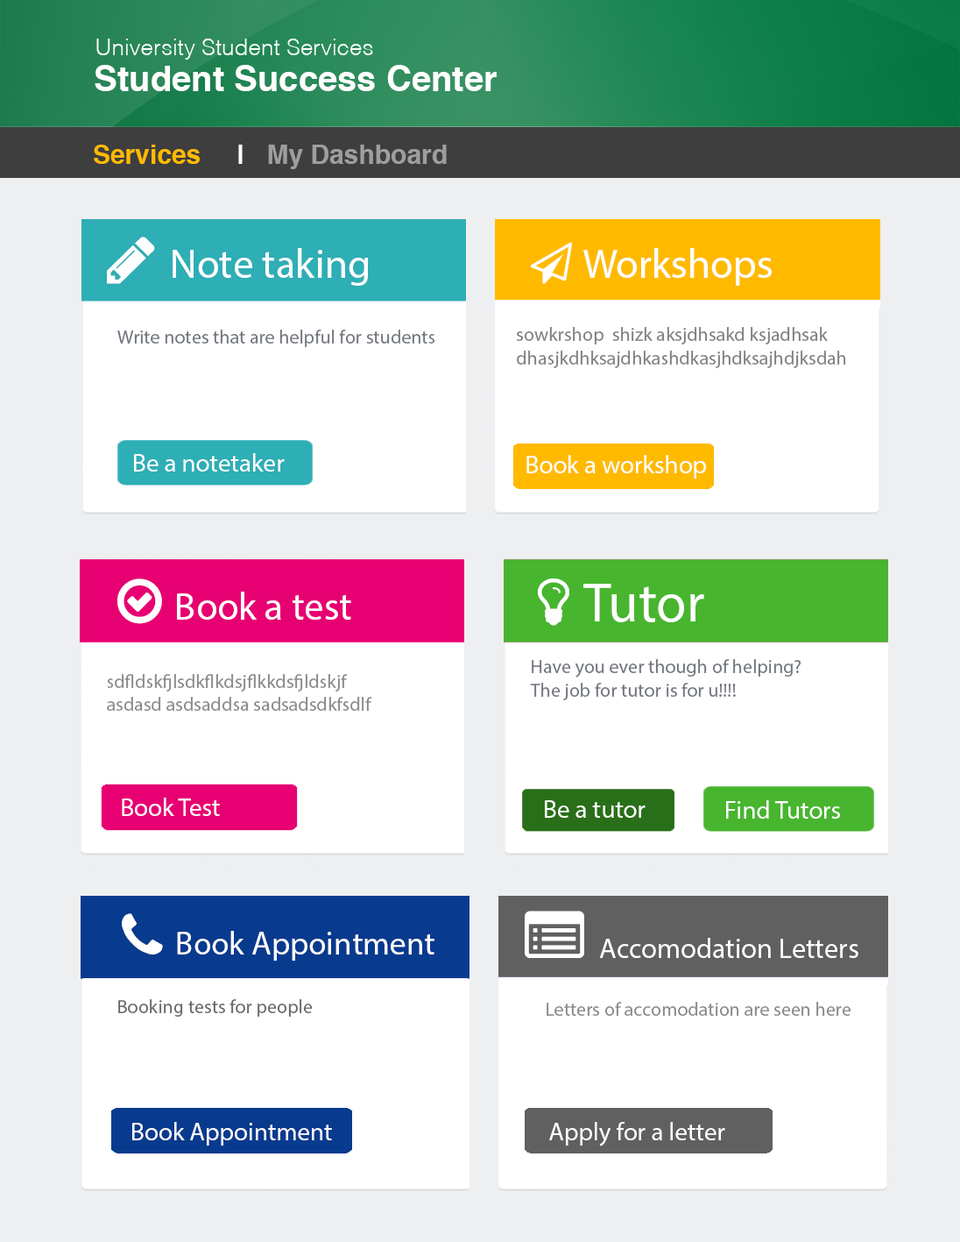
<style>
.page{position:relative;width:960px;height:1242px;background:#ffffff}
.page>*{position:absolute;margin:0}
.t1{font:35px "Helvetica-Bold";color:#ffffff}
.t2{font:26.3px "Helvetica-Bold";color:#9e9e9e}
.t3{font:26.3px "Helvetica-Bold";color:#ffba00}
.t4{font:26.3px "Helvetica-Bold";color:#ffffff}
.t5{font:41.2px "MyriadPro-Regular";color:#ffffff}
.t6{font:19.3px "MyriadPro-Regular";color:#72767e}
.t7{font:19.3px "MyriadPro-Regular";color:#808080}
.t8{font:25.4px "MyriadPro-Regular";color:#ffffff}
.t9{font:19.3px "MyriadPro-Regular";color:#8a8a8a}
.t10{font:19.3px "MyriadPro-Regular";color:#686869}
</style>
<div class="page">
<p class="t1" style="left:95px;top:65px;width:402px;height:26px">Student Success Center</p>
<p class="t2" style="left:94px;top:145px;width:353px;height:24px"><span class="t3">Services</span><span class="t4">     |   </span>My Dashboard</p>
<p class="t5" style="left:173px;top:248px;width:196px;height:38px">Note taking</p>
<p class="t6" style="left:117px;top:329px;width:318px;height:18px">Write notes that are helpful for students</p>
<p class="t7" style="left:516px;top:327px;width:330px;height:41px">sowkrshop  shizk aksjdhsakd ksjadhsak<br>dhasjkdhksajdhkashdkasjhdksajhdjksdah</p>
<p class="t8" style="left:134px;top:453px;width:151px;height:18px">Be a notetaker</p>
<p class="t8" style="left:527px;top:455px;width:179px;height:23px">Book a workshop</p>
<p class="t6" style="left:530px;top:659px;width:272px;height:41px">Have you ever though of helping?<br>The job for tutor is for u!!!!</p>
<p class="t9" style="left:107px;top:674px;width:265px;height:37px">sdfldskfjlsdkflkdsjflkkdsfjldskjf<br>asdasd asdsaddsa sadsadsdkfsdlf</p>
<p class="t8" style="left:122px;top:797px;width:98px;height:19px">Book Test</p>
<p class="t8" style="left:545px;top:800px;width:101px;height:18px">Be a tutor</p>
<p class="t8" style="left:726px;top:800px;width:114px;height:18px">Find Tutors</p>
<p class="t10" style="left:118px;top:999px;width:195px;height:17px">Booking tests for people</p>
<p class="t9" style="left:547px;top:1002px;width:305px;height:14px">Letters of accomodation are seen here</p>
<p class="t8" style="left:132px;top:1122px;width:200px;height:23px">Book Appointment</p>
<p class="t8" style="left:549px;top:1122px;width:177px;height:24px">Apply for a letter</p>
</div>
